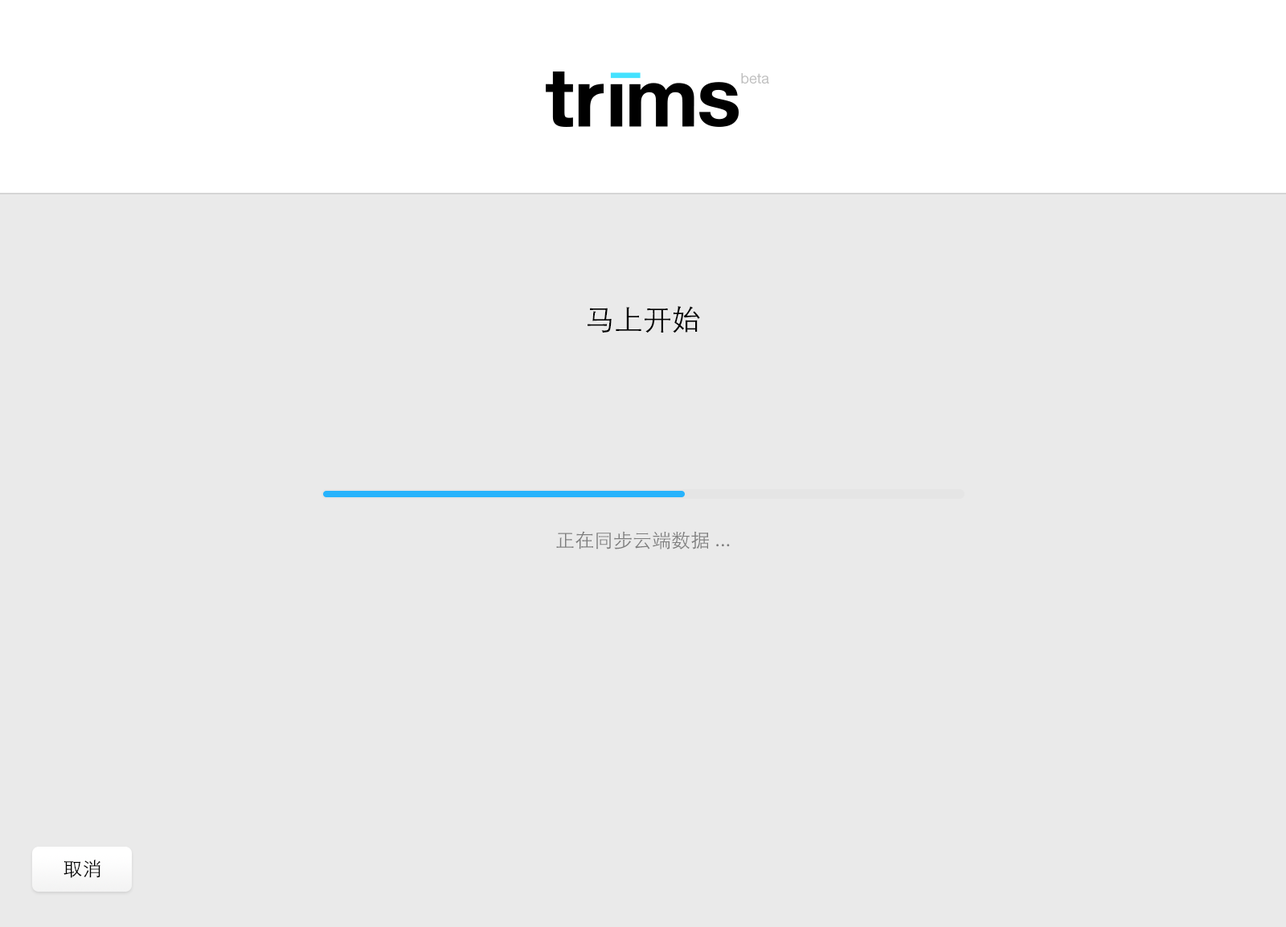
<style>
.page{position:relative;width:1286px;height:927px;background:#eaeaea}
.page>*{position:absolute;margin:0}
.t1{font:14.5px "HelveticaNeue";color:#bebebe}
.t2{font:28.9px "STHeitiSC-Light";color:#000000}
.t3{font:19.3px "STHeitiSC-Light";color:#7d7d7d}
.t4{font:19.3px "STHeitiSC-Light";color:#000000}
</style>
<div class="page">
<p class="t1" style="left:741px;top:73px;width:28px;height:11px">beta</p>
<p class="t2" style="left:587px;top:306px;width:113px;height:28px">马上开始</p>
<p class="t3" style="left:556px;top:531px;width:174px;height:19px">正在同步云端数据 ...</p>
<p class="t4" style="left:63px;top:860px;width:37px;height:18px">取消</p>
</div>
